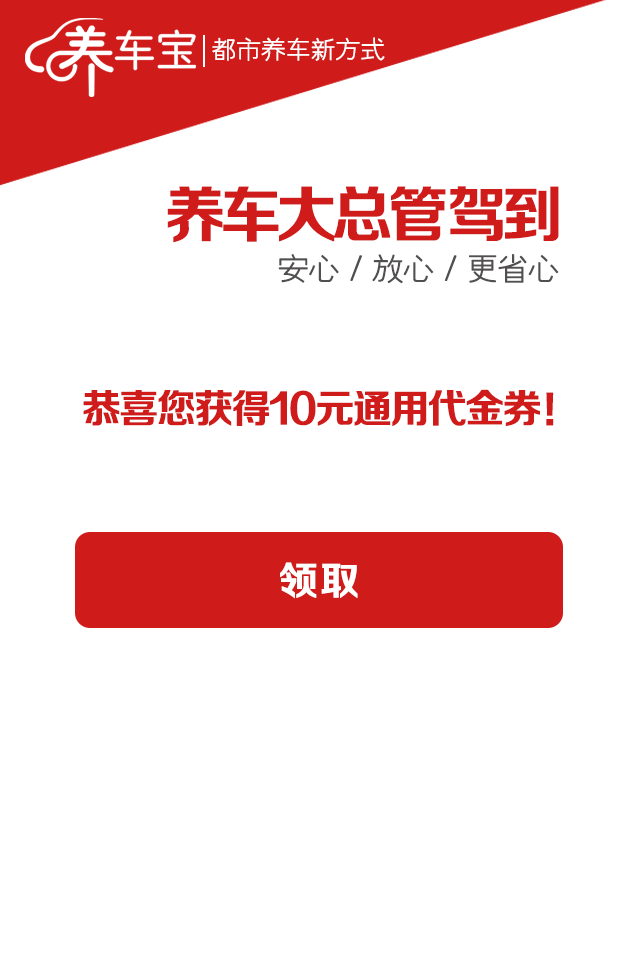
<style>
.page{position:relative;width:640px;height:961px;background:#ffffff}
.page>*{position:absolute;margin:0}
.t1{font:24.9px "JYouXian";letter-spacing:-0.03em;color:#ffffff;font-weight:bold}
.t2{font:61.2px "FZZCHJW--GB1-0";letter-spacing:-0.09em;color:#cf1c1b}
.t3{font:31.9px "JYouXian";letter-spacing:-0.07em;color:#524f4f;font-weight:bold}
.t4{font:39.4px "FZZCHJW--GB1-0";letter-spacing:-0.05em;color:#cf1c1b}
.t5{font:39.4px "FZZCHJW--GB1-0";letter-spacing:0.05em;color:#ffffff}
</style>
<div class="page">
<p class="t1" style="left:212px;top:37px;width:173px;height:25px">都市养车新方式</p>
<p class="t2" style="left:167px;top:186px;width:392px;height:57px">养车大总管驾到</p>
<p class="t3" style="left:278px;top:253px;width:281px;height:31px">安心 / 放心 / 更省心</p>
<p class="t4" style="left:83px;top:389px;width:471px;height:37px">恭喜您获得10元通用代金券！</p>
<p class="t5" style="left:280px;top:562px;width:78px;height:37px">领取</p>
</div>
